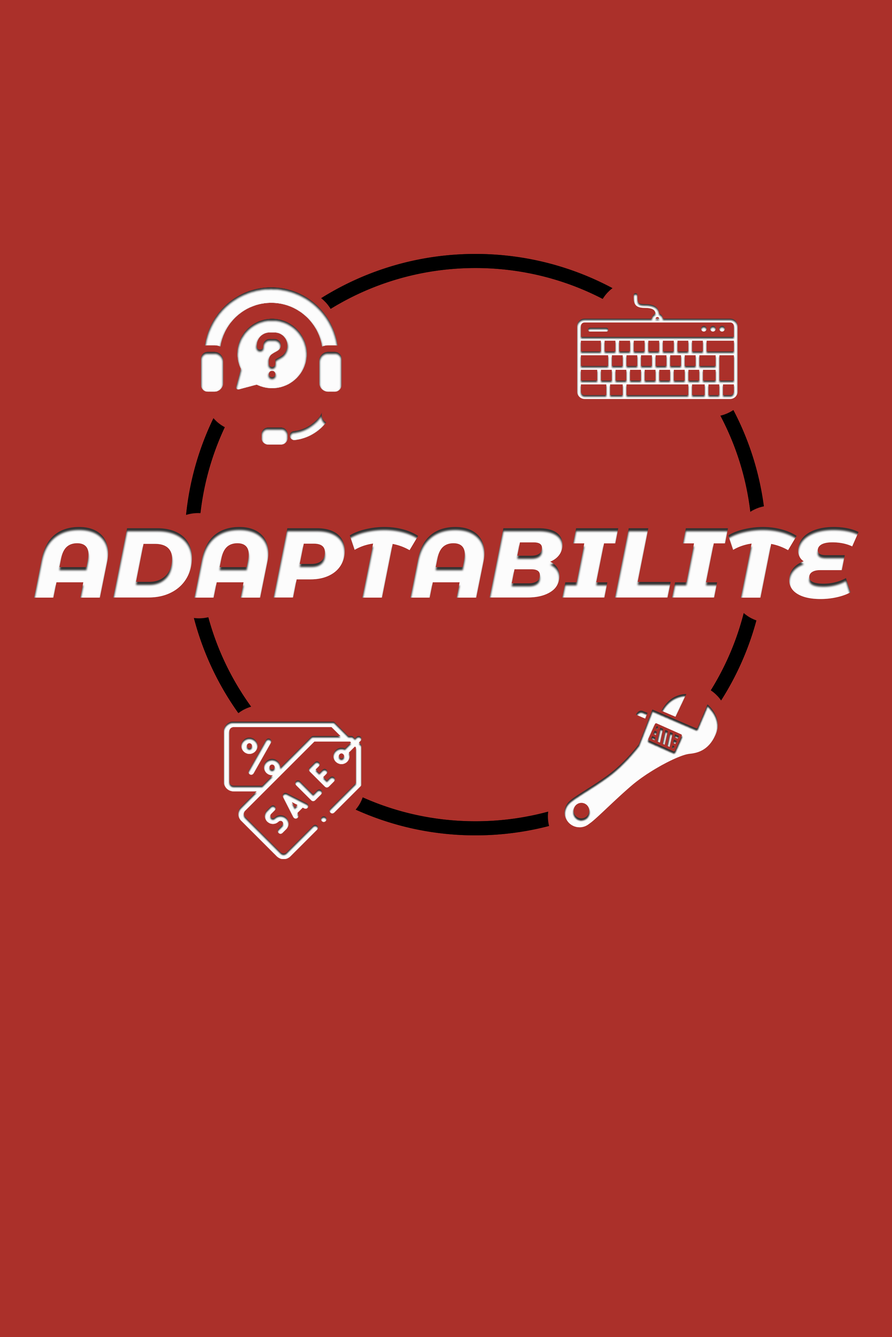
<style>
.page{position:relative;width:892px;height:1337px;background:#ab302a}
.page>*{position:absolute;margin:0}
.t1{font:99px "MontserratAlternates-ExtraBoldItalic";color:#fcfcfc}
</style>
<div class="page">
<p class="t1" style="left:34px;top:527px;width:824px;height:72px">ADAPTABILITE</p>
</div>
